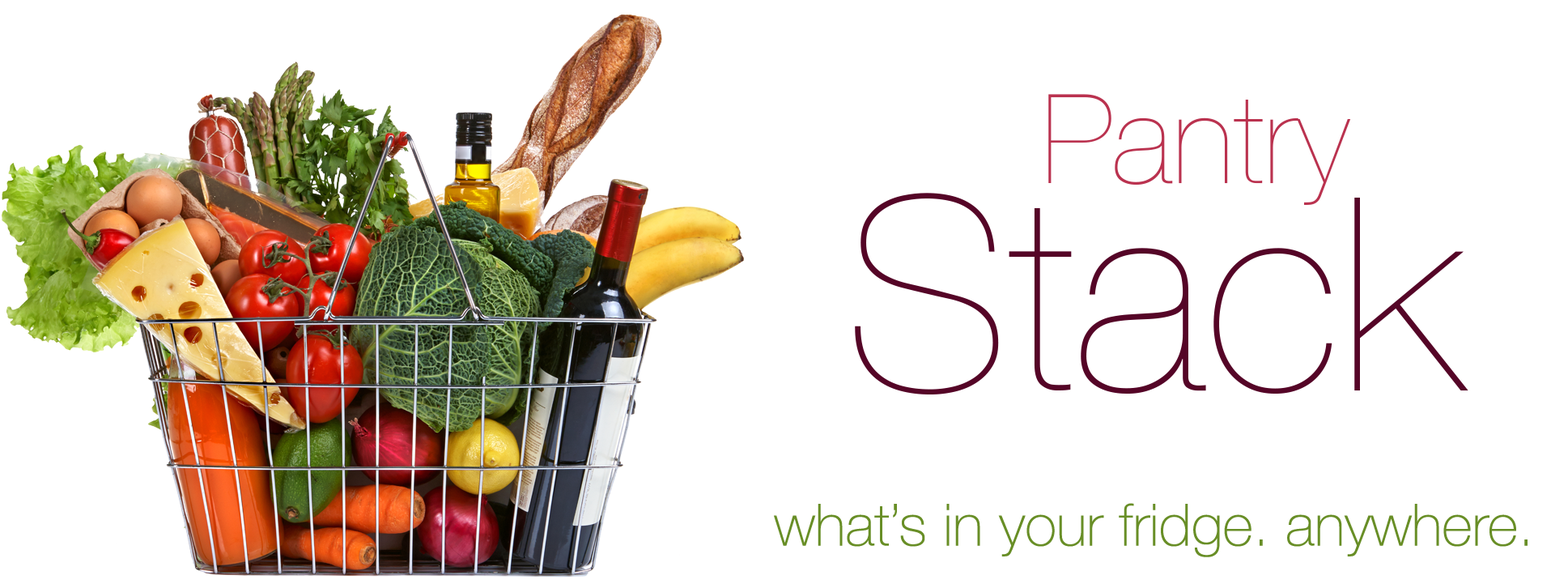
<style>
.page{position:relative;width:1568px;height:584px;background:#ffffff}
.page>*{position:absolute;margin:0}
.t1{font:123.9px "HelveticaNeue-UltraLight";color:#ba324f}
.t2{font:269.6px "HelveticaNeue-UltraLight";color:#550527}
.t3{font:58.3px "HelveticaNeue-Thin";color:#688e26}
</style>
<div class="page">
<p class="t1" style="left:1048px;top:94px;width:303px;height:111px">Pantry</p>
<p class="t2" style="left:855px;top:193px;width:613px;height:201px">Stack</p>
<p class="t3" style="left:774px;top:503px;width:754px;height:54px">what’s in your fridge. anywhere.</p>
</div>
